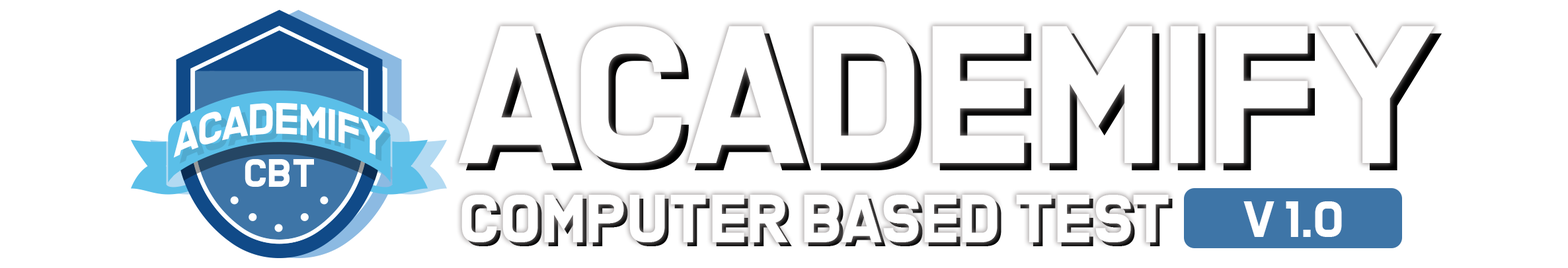
<style>
.page{position:relative;width:1568px;height:268px;background:#ffffff}
.page>*{position:absolute;margin:0}
.t1{font:187.2px "FreshEaters";color:#ffffff}
.t2{font:40.4px "FreshEaters";color:#ffffff}
.t3{font:38px "FreshEaters";color:#ffffff}
.t4{font:64.9px "FreshEaters";color:#ffffff}
.t5{font:49.2px "FreshEaters";color:#ffffff}
</style>
<div class="page">
<p class="t1" style="left:458px;top:26px;width:976px;height:137px">Academify</p>
<p class="t2" style="left:173px;top:103px;width:212px;height:55px">Academify</p>
<p class="t3" style="left:245px;top:159px;width:69px;height:28px">CBT</p>
<p class="t4" style="left:461px;top:195px;width:708px;height:48px">Computer Based Test</p>
<p class="t5" style="left:1243px;top:202px;width:99px;height:35px">V 1.0</p>
</div>
